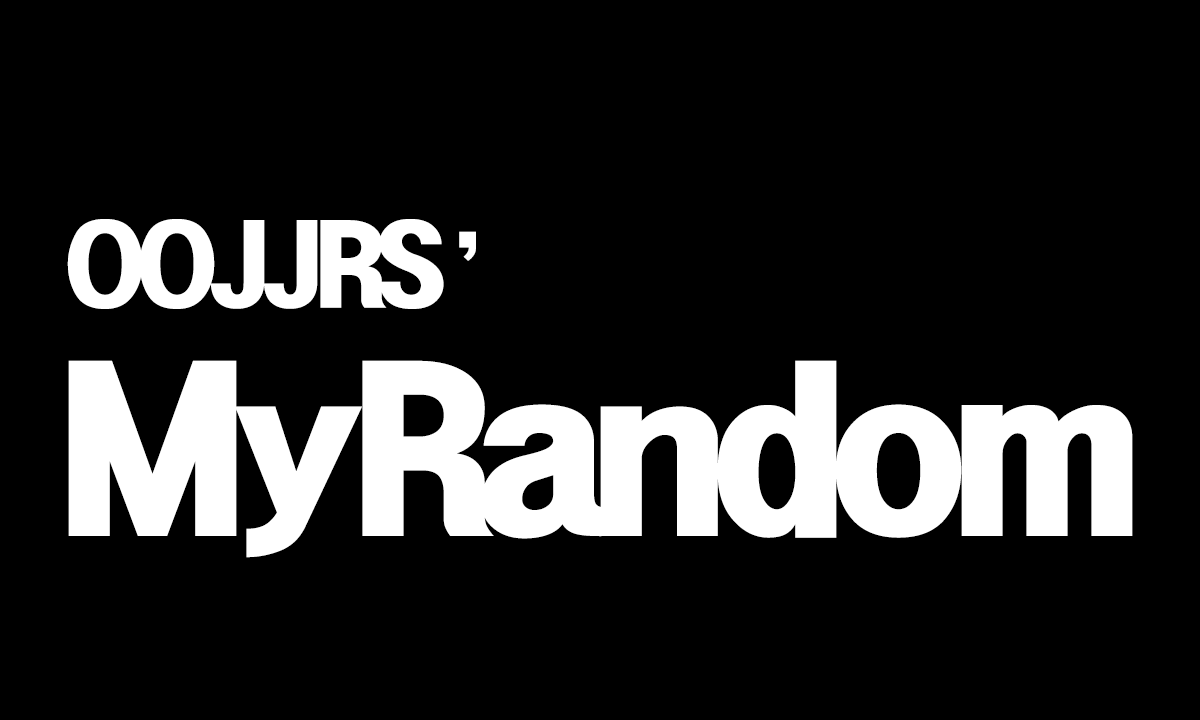
<style>
.page{position:relative;width:1200px;height:720px;background:#000000}
.page>*{position:absolute;margin:0}
.t1{font:100px "HeadlineR-HM";letter-spacing:-0.125em;color:#ffffff}
.t2{font:200px "HeadlineR-HM";letter-spacing:-0.125em;color:#ffffff}
</style>
<div class="page">
<p class="t1" style="left:67px;top:219px;width:409px;height:90px">OOJJRS’</p>
<p class="t2" style="left:68px;top:360px;width:1065px;height:198px">MyRandom</p>
</div>
